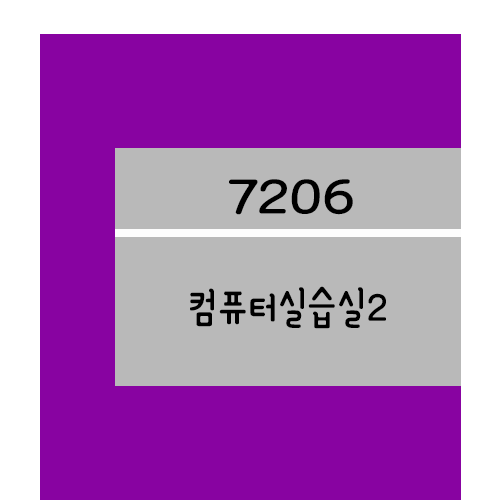
<style>
.page{position:relative;width:500px;height:500px;background:#8803a1}
.page>*{position:absolute;margin:0}
.t1{font:61.2px "YanoljaYacheR";color:#000000;scale:1.18 1}
.t2{font:48px "YanoljaYacheR";color:#000000}
</style>
<div class="page">
<p class="t1" style="left:229px;top:179px;width:124px;height:36px">7206</p>
<p class="t2" style="left:190px;top:286px;width:196px;height:43px">컴퓨터실습실2</p>
</div>
